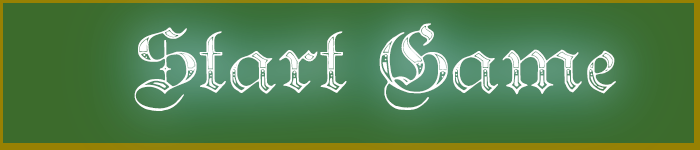
<style>
.page{position:relative;width:700px;height:150px}
.page>*{position:absolute;margin:0}
.t1{font:72px "TeutonicNo4-DemiBold";color:#ffffff}
</style>
<div class="page">
<p class="t1" style="left:134px;top:23px;width:482px;height:88px">Start Game</p>
</div>
